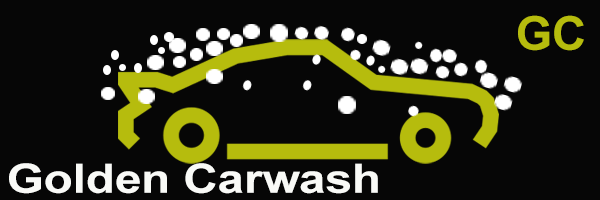
<style>
.page{position:relative;width:600px;height:200px;background:#060606}
.page>*{position:absolute;margin:0}
.t1{font:46.7px "Arial-BoldMT";color:#b6bc0d}
.t2{font:40.5px "Arial-BoldMT";color:#f9faf7;scale:1.17 1}
</style>
<div class="page">
<p class="t1" style="left:518px;top:15px;width:66px;height:36px">GC</p>
<p class="t2" style="left:9px;top:163px;width:369px;height:31px">Golden Carwash</p>
</div>
